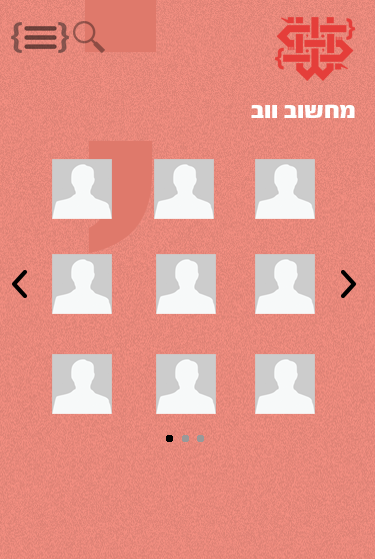
<style>
.page{position:relative;width:375px;height:559px}
.page>*{position:absolute;margin:0}
.t1{font:25px "FbScorpion-Black";color:#ffffff}
</style>
<div class="page">
<p class="t1" style="left:251px;top:104px;width:104px;height:14px">בוו בושחמ</p>
</div>
